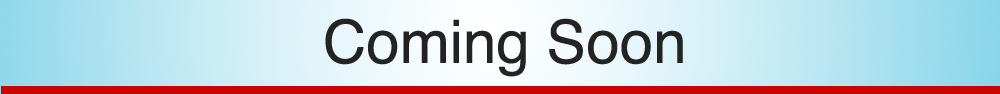
<style>
.page{position:relative;width:1000px;height:94px}
.page>*{position:absolute;margin:0}
.t1{font:60px "Helvetica";color:#232323}
</style>
<div class="page">
<p class="t1" style="left:325px;top:18px;width:358px;height:59px">Coming Soon</p>
</div>
